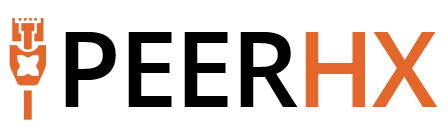
<style>
.page{position:relative;width:448px;height:140px;background:#ffffff}
.page>*{position:absolute;margin:0}
.t1{font:105.5px "OpenSans-Semibold";letter-spacing:-0.025em;color:#000000}
.t2{font:105.5px "OpenSans-Semibold";letter-spacing:-0.025em;color:#e3672a}
</style>
<div class="page">
<p class="t1" style="left:65px;top:32px;width:373px;height:75px">PEER<span class="t2">HX</span></p>
</div>
